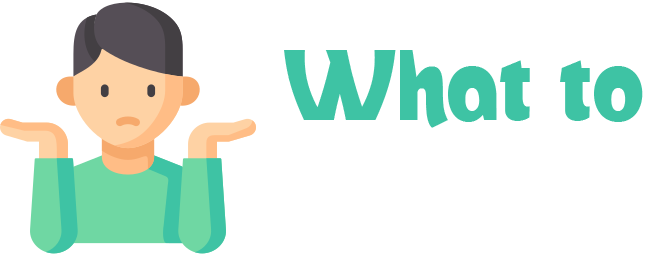
<style>
.page{position:relative;width:649px;height:256px;background:#ffffff}
.page>*{position:absolute;margin:0}
.t1{font:100px "Winear";color:#3ec3a4}
.t2{font:100px/87px "Winear";letter-spacing:0.38em;color:#ffffff}
</style>
<div class="page">
<p class="t1" style="left:284px;top:50px;width:365px;height:157px">What to<br><span class="t2">EAT?</span></p>
</div>
